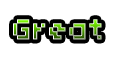
<style>
.page{position:relative;width:118px;height:60px;background:#ffffff}
.page>*{position:absolute;margin:0}
.t1{font:32px "04b03"}
</style>
<div class="page">
<p class="t1" style="left:13px;top:19px;width:89px;height:21px">Great</p>
<p class="t1" style="left:13px;top:19px;width:89px;height:21px">Great</p>
<p class="t1" style="left:13px;top:19px;width:89px;height:21px">Great</p>
</div>
